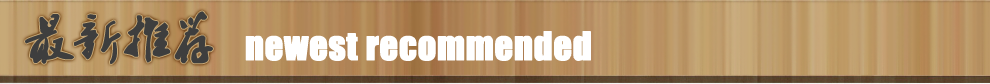
<style>
.page{position:relative;width:990px;height:84px}
.page>*{position:absolute;margin:0}
.t1{font:48px "2.0-";color:#3e3e3e;font-weight:bold}
.t2{font:36px "Impact";color:#ffffff;font-weight:bold}
</style>
<div class="page">
<p class="t1" style="left:25px;top:11px;width:188px;height:53px">最新推荐</p>
<p class="t2" style="left:245px;top:31px;width:346px;height:30px">newest recommended</p>
</div>
